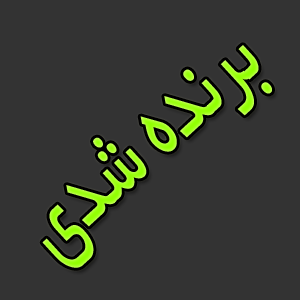
<style>
.page{position:relative;width:300px;height:300px;background:#333333}
.page>*{position:absolute;margin:0}
.t1{font:107.8px "BYekan";scale:0.64 1}
</style>
<div class="page">
<p class="t1" style="left:42px;top:45px;width:230px;height:223px;rotate:-43deg">برنده شدی</p>
</div>
